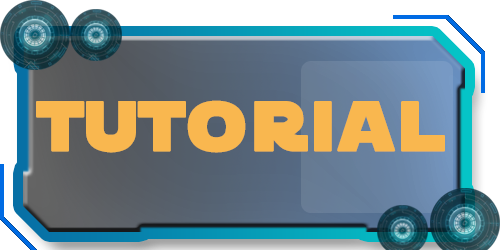
<style>
.page{position:relative;width:500px;height:250px}
.page>*{position:absolute;margin:0}
.t1{font:68.6px "StarJediSpecialEdition";letter-spacing:0.1em;color:#f9b74f;font-weight:bold}
</style>
<div class="page">
<p class="t1" style="left:36px;top:100px;width:409px;height:53px">TuTorial</p>
</div>
